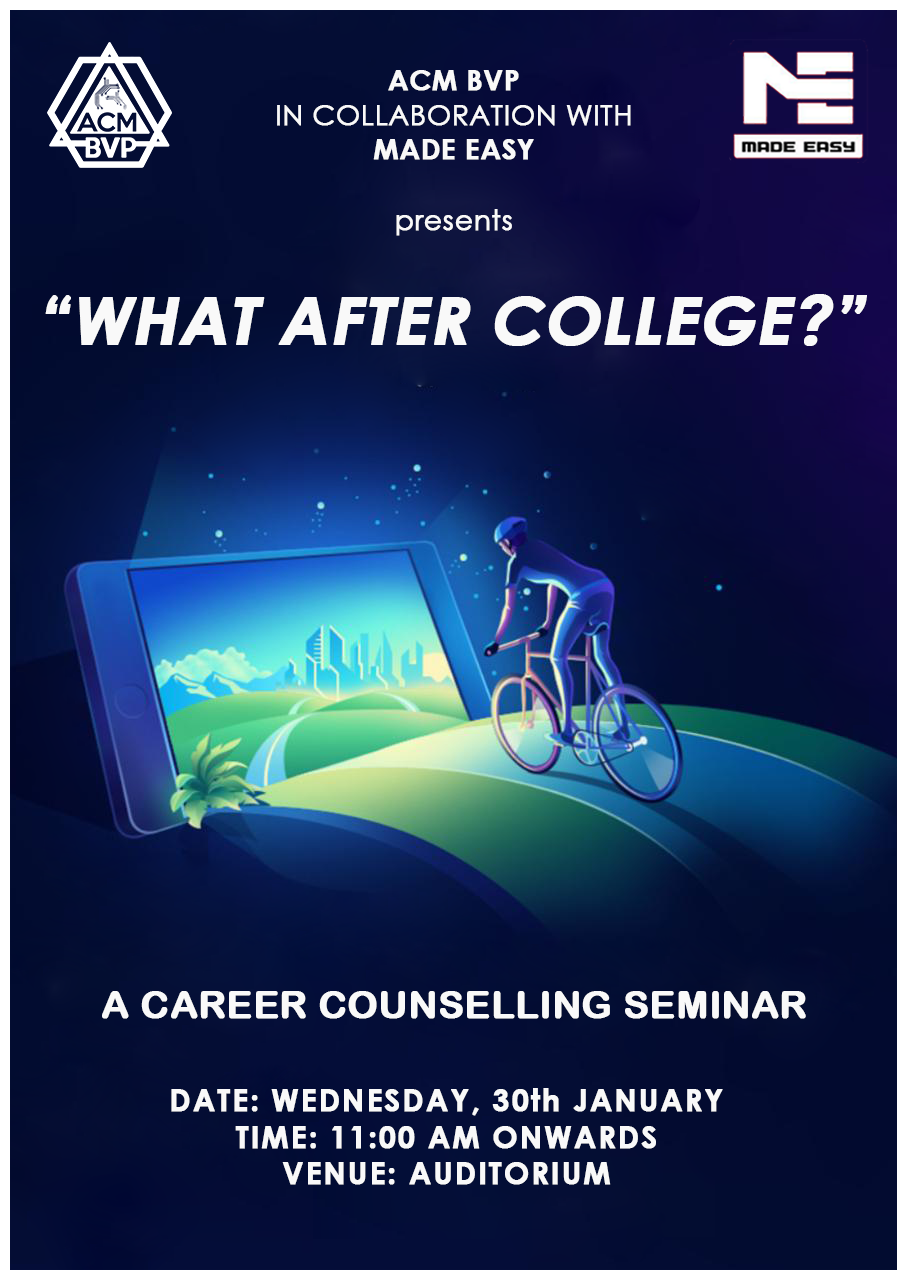
<style>
.page{position:relative;width:907px;height:1280px}
.page>*{position:absolute;margin:0}
.t1{font:28px "CenturyGothic";color:#f9f9f9;font-weight:bold}
.t2{font:28px "CenturyGothic-Bold";color:#f9f9f9;font-weight:bold}
.t3{font:66px "CenturyGothic-Bold";color:#f9f9f9;font-weight:bold;font-style:italic}
.t4{font:38px "ArialRoundedMTBold";color:#f9f9f9;font-weight:bold}
.t5{font:30px "CenturyGothic-Bold";letter-spacing:0.05em;color:#f9f9f9;font-weight:bold}
</style>
<div class="page">
<p class="t1" style="left:277px;top:70px;width:354px;height:166px;text-align:center"><span class="t2">ACM BVP<br></span>IN COLLABORATION WITH<br><span class="t2">MADE EASY<br></span>presents</p>
<p class="t3" style="left:45px;top:294px;width:822px;height:52px">“WHAT AFTER COLLEGE?”</p>
<p class="t4" style="left:102px;top:991px;width:704px;height:28px">A CAREER COUNSELLING SEMINAR</p>
<p class="t5" style="left:171px;top:1088px;width:552px;height:97px;text-align:center">DATE: WEDNESDAY, 30th JANUARY<br>TIME: 11:00 AM ONWARDS<br>VENUE: AUDITORIUM</p>
</div>
